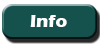
<style>
.page{position:relative;width:100px;height:45px;background:#15514d}
.page>*{position:absolute;margin:0}
.t1{font:18px "ErasITC-Bold";color:#ffffff}
</style>
<div class="page">
<p class="t1" style="left:30px;top:15px;width:37px;height:12px">Info</p>
</div>
